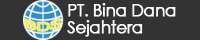
<style>
.page{position:relative;width:200px;height:40px;background:#333333}
.page>*{position:absolute;margin:0}
.t1{font:16.9px/17.4px "CenturyGothic";letter-spacing:-0.04em;color:#ffffff;font-weight:bold}
</style>
<div class="page">
<p class="t1" style="left:67px;top:3px;width:109px;height:34px">PT. Bina Dana<br>Sejahtera</p>
</div>
